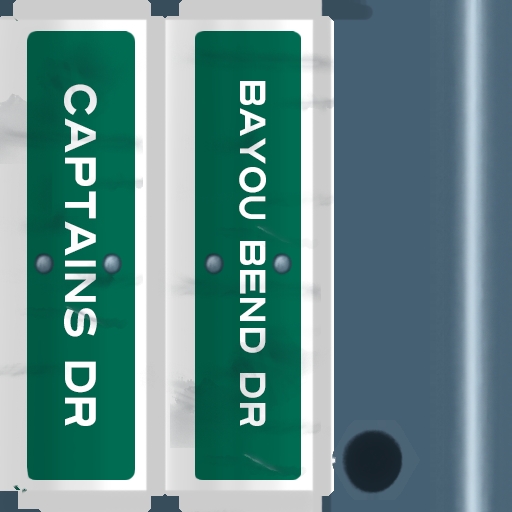
<style>
.page{position:relative;width:512px;height:512px}
.page>*{position:absolute;margin:0}
.t1{font:44px "Turnpike";color:#fefeff;scale:0.75 1}
.t2{font:36px "Turnpike";color:#fefeff;scale:0.75 1}
</style>
<div class="page">
<p class="t1" style="left:64px;top:84px;width:33px;height:342px;rotate:90deg">Captains Dr</p>
<p class="t2" style="left:239px;top:81px;width:27px;height:345px;rotate:90deg">Bayou Bend Dr</p>
</div>
